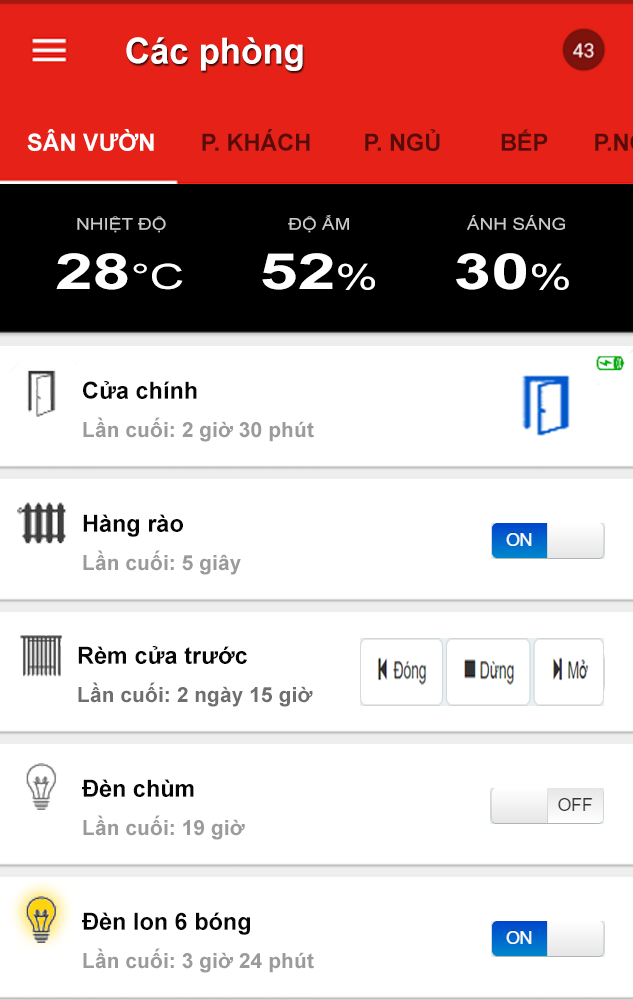
<style>
.page{position:relative;width:633px;height:1000px;background:#ffffff}
.page>*{position:absolute;margin:0}
.t1{font:35.6px "Arial-BoldMT";color:#ffffff}
.t2{font:16.4px "ArialMT";color:#cacaca;scale:1.16 1}
.t3{font:50px "Arial-BoldMT";color:#ffffff;scale:1.36 1}
.t4{font:35px "ArialMT";color:#ffffff;scale:1.36 1}
.t5{font:23.5px "Arial-BoldMT";color:#060606}
.t6{font:21.1px "Arial-BoldMT";color:#9b9b9b}
.t7{font:21.1px "Arial-BoldMT";color:#706f6f}
</style>
<div class="page">
<p class="t1" style="left:126px;top:37px;width:177px;height:34px">Các phòng</p>
<p class="t2" style="left:77px;top:215px;width:488px;height:18px">NHIỆT ĐỘ                       ĐỘ ẨM                      ÁNH SÁNG</p>
<p class="t3" style="left:56px;top:253px;width:513px;height:37px">28<span class="t4">°C</span>    52<span class="t4">%</span>    30<span class="t4">%</span></p>
<p class="t5" style="left:83px;top:381px;width:114px;height:18px">Cửa chính</p>
<p class="t6" style="left:83px;top:417px;width:231px;height:25px">Lần cuối: 2 giờ 30 phút</p>
<p class="t5" style="left:83px;top:514px;width:100px;height:23px">Hàng rào</p>
<p class="t6" style="left:83px;top:550px;width:158px;height:25px">Lần cuối: 5 giây</p>
<p class="t5" style="left:78px;top:646px;width:169px;height:18px">Rèm cửa trước</p>
<p class="t7" style="left:78px;top:682px;width:235px;height:25px">Lần cuối: 2 ngày 15 giờ</p>
<p class="t5" style="left:82px;top:779px;width:112px;height:18px">Đèn chùm</p>
<p class="t6" style="left:83px;top:815px;width:162px;height:25px">Lần cuối: 19 giờ</p>
<p class="t5" style="left:82px;top:912px;width:168px;height:23px">Đèn lon 6 bóng</p>
<p class="t6" style="left:83px;top:948px;width:231px;height:25px">Lần cuối: 3 giờ 24 phút</p>
</div>
